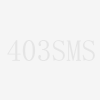
<style>
.page{position:relative;width:100px;height:100px;background:#f5f5f5}
.page>*{position:absolute;margin:0}
.t1{font:30px "SimSun";color:#e5e5e5}
</style>
<div class="page">
<p class="t1" style="left:7px;top:40px;width:88px;height:21px">403SMS</p>
</div>
